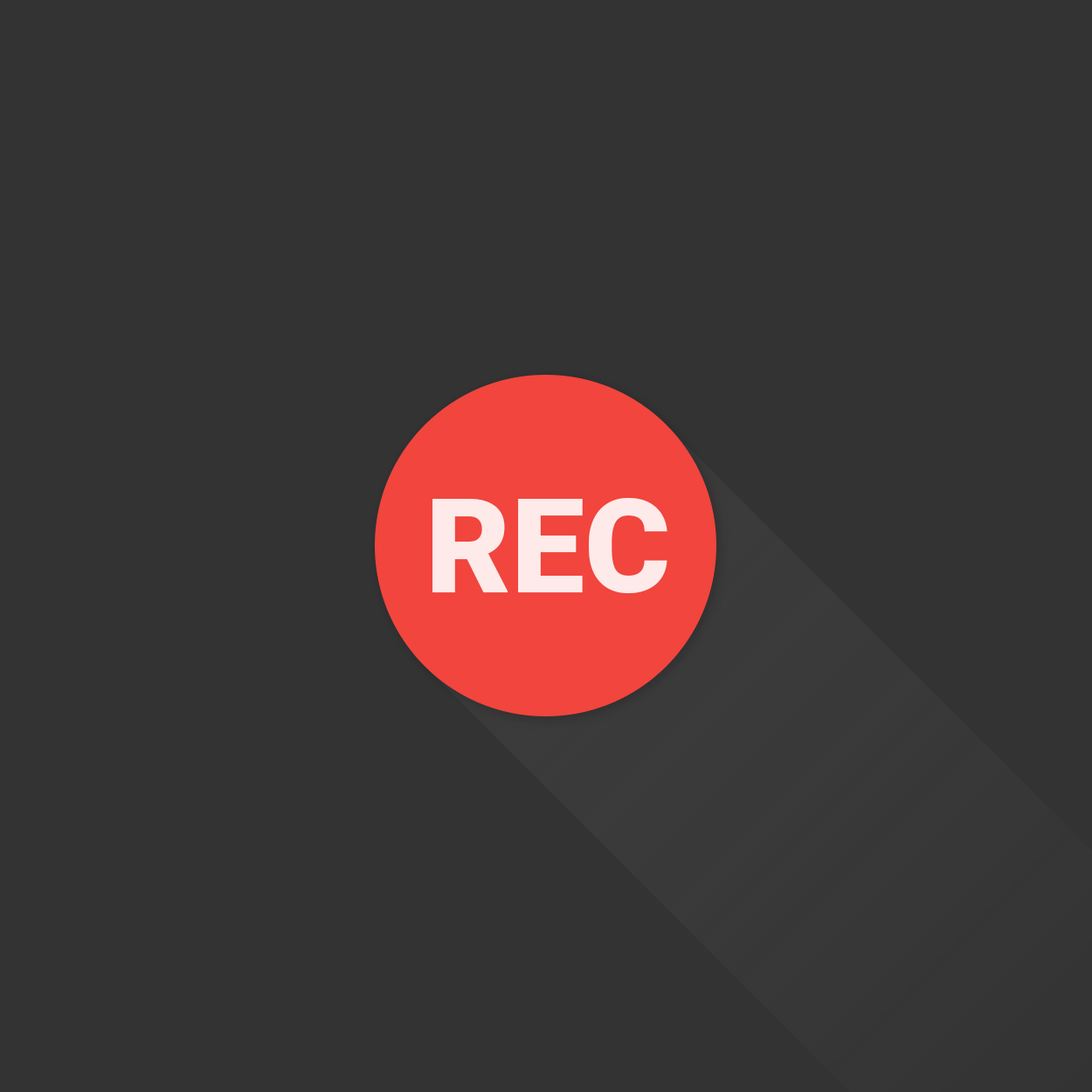
<style>
.page{position:relative;width:1092px;height:1092px;background:#333333}
.page>*{position:absolute;margin:0}
.t1{font:131px "Roboto-Black";color:#ffffff}
</style>
<div class="page">
<p class="t1" style="left:432px;top:498px;width:235px;height:95px;opacity:0.85">REC</p>
</div>
